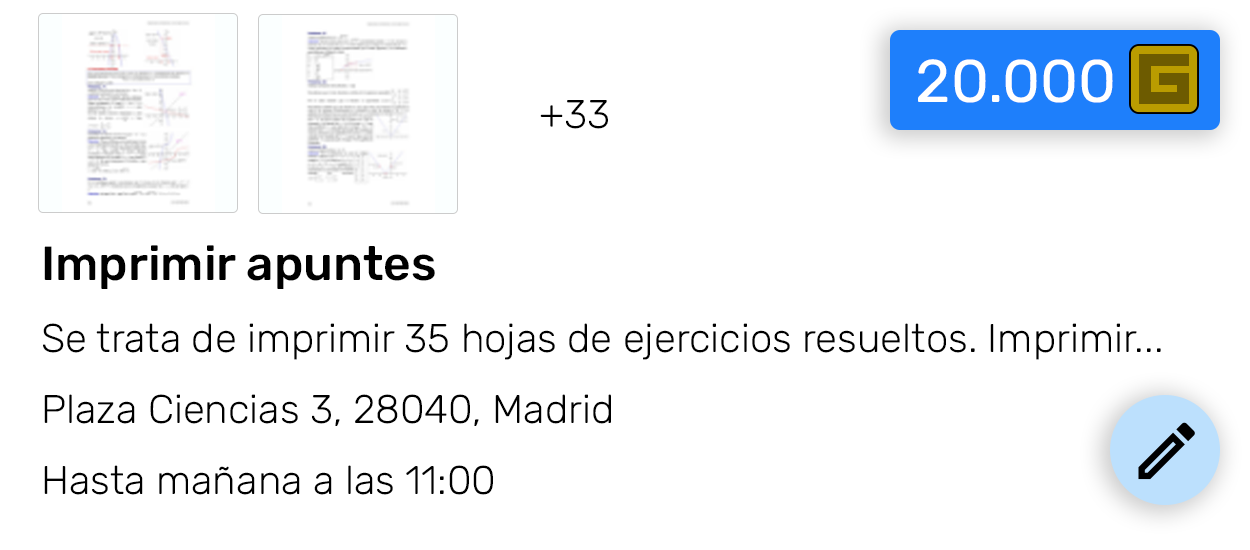
<style>
.page{position:relative;width:1250px;height:550px;background:#ffffff}
.page>*{position:absolute;margin:0}
.t1{font:60px "Rubik-Regular";color:#ffffff}
.t2{font:40px "Rubik-Light";color:#000000}
.t3{font:10px "Roboto-Regular";color:#000000}
.t4{font:48px "Rubik-Medium";color:#000000}
</style>
<div class="page">
<p class="t1" style="left:918px;top:59px;width:195px;height:44px">20.000</p>
<p class="t2" style="left:540px;top:100px;width:68px;height:29px">+33</p>
<p class="t2" style="left:43px;top:245px;width:1118px;height:250px"><span class="t3">      <br><br><br>      <br><br><br>      <br><br><br></span><span class="t4">Imprimir apuntes<br><br></span>Se trata de imprimir 35 hojas de ejercicios resueltos. Imprimir...<br><br><br>Plaza Ciencias 3, 28040, Madrid<br><br><br>Hasta mañana a las 11:00</p>
</div>
